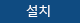
<style>
.page{position:relative;width:80px;height:23px;background:#0f4b81}
.page>*{position:absolute;margin:0}
.t1{font:12.5px "MalgunGothic";color:#ffffff}
</style>
<div class="page">
<p class="t1" style="left:26px;top:5px;width:24px;height:12px">설치</p>
</div>
